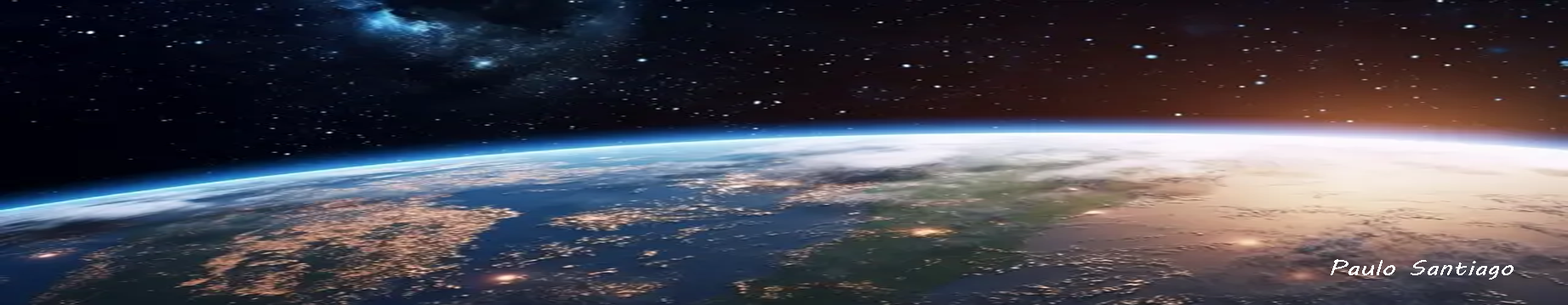
<style>
.page{position:relative;width:1568px;height:305px}
.page>*{position:absolute;margin:0}
.t1{font:20.4px "MVBoli";color:#ffffff;scale:1.3 1}
</style>
<div class="page">
<p class="t1" style="left:1331px;top:259px;width:183px;height:21px">Paulo Santiago</p>
</div>
